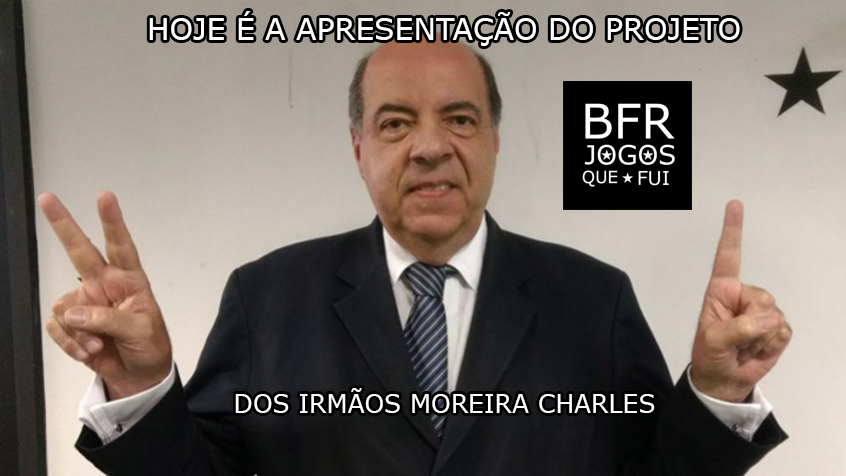
<style>
.page{position:relative;width:846px;height:476px}
.page>*{position:absolute;margin:0}
.t1{font:29.6px "Verdana";color:#ffffff}
.t2{font:25px "Verdana";color:#ffffff}
</style>
<div class="page">
<p class="t1" style="left:149px;top:11px;width:591px;height:35px">HOJE É A APRESENTAÇÃO DO PROJETO</p>
<p class="t2" style="left:235px;top:388px;width:420px;height:25px">DOS IRMÃOS MOREIRA CHARLES</p>
</div>
